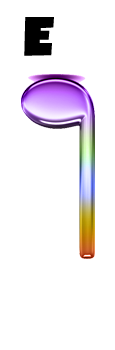
<style>
.page{position:relative;width:115px;height:350px;background:#ffffff}
.page>*{position:absolute;margin:0}
.t1{font:54px "LuckiestGuy-Regular";letter-spacing:0.005em;color:#000000;font-weight:bold;scale:1.11 1}
</style>
<div class="page">
<p class="t1" style="left:24px;top:17px;width:30px;height:39px">E</p>
</div>
